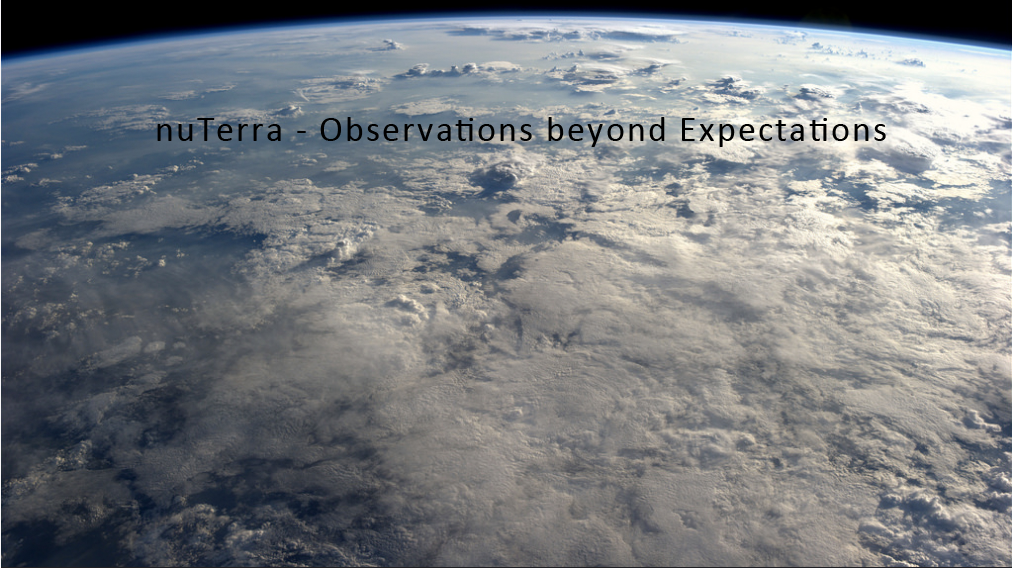
<style>
.page{position:relative;width:1012px;height:568px}
.page>*{position:absolute;margin:0}
.t1{font:36px "Calibri";letter-spacing:0.06em;color:#000000}
</style>
<div class="page">
<p class="t1" style="left:157px;top:117px;width:729px;height:30px">nuTerra - Observations beyond Expectations</p>
</div>
